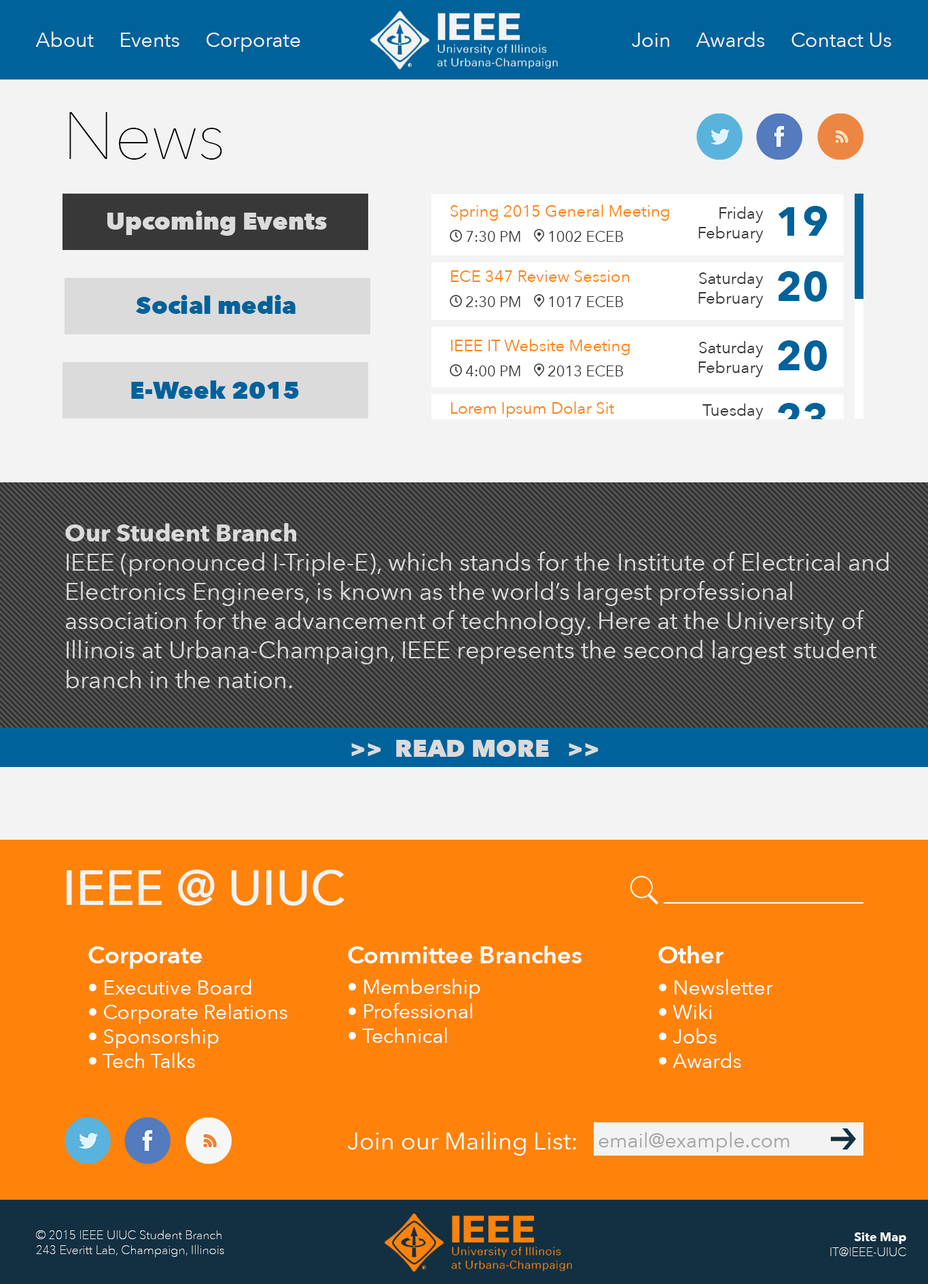
<style>
.page{position:relative;width:928px;height:1284px;background:#f3f3f3}
.page>*{position:absolute;margin:0}
.t1{font:20.4px "AvenirNext-Regular";color:#f3f3f3}
.t2{font:66.6px "AvenirNext-UltraLight";color:#000000}
.t3{font:16.3px "AvenirNext-Regular";color:#ff830a}
.t4{font:16.3px "AvenirNext-Regular";color:#383838}
.t5{font:40.8px "AvenirNext-Bold";color:#00629b}
.t6{font:24.5px "AvenirNext-Heavy";color:#dbdbdb}
.t7{font:15px "AvenirNext-Regular";color:#383838}
.t8{font:24.5px "AvenirNext-Heavy";color:#00629b}
.t9{font:16.3px "AvenirNext-Regular"}
.t10{font:40.8px "AvenirNext-Bold"}
.t11{font:24.5px "AvenirNext-Regular";color:#dbdbdb}
.t12{font:24.5px "AvenirNext-Bold";color:#dbdbdb}
.t13{font:48.9px "AvenirNext-Medium";color:#f3f3f3}
.t14{font:24.5px "AvenirNext-DemiBold";color:#ffffff}
.t15{font:20.4px "AvenirNext-Regular";color:#ffffff}
.t16{font:24.5px "AvenirNext-Regular";color:#ffffff}
.t17{font:20.4px "AvenirNext-Regular";color:#a4a4a4}
.t18{font:12.2px "AvenirNext-UltraLight";color:#f3f3f3}
.t19{font:12.2px "AvenirNext-Bold";color:#f3f3f3}
</style>
<div class="page">
<p class="t1" style="left:35px;top:31px;width:265px;height:21px">About     Events     Corporate</p>
<p class="t1" style="left:632px;top:31px;width:260px;height:16px">Join     Awards     Contact Us</p>
<p class="t2" style="left:69px;top:112px;width:153px;height:48px">News</p>
<p class="t3" style="left:451px;top:205px;width:218px;height:16px">Spring 2015 General Meeting</p>
<p class="t4" style="left:699px;top:207px;width:65px;height:36px;text-align:right">Friday<br>February</p>
<p class="t5" style="left:778px;top:206px;width:50px;height:30px">19</p>
<p class="t6" style="left:107px;top:211px;width:220px;height:25px">Upcoming Events</p>
<p class="t7" style="left:466px;top:231px;width:55px;height:11px">7:30 PM</p>
<p class="t7" style="left:549px;top:231px;width:75px;height:11px">1002 ECEB</p>
<p class="t3" style="left:451px;top:270px;width:178px;height:12px">ECE 347 Review Session</p>
<p class="t4" style="left:699px;top:272px;width:65px;height:36px;text-align:right">Saturday<br>February</p>
<p class="t5" style="left:778px;top:271px;width:49px;height:31px">20</p>
<p class="t8" style="left:136px;top:295px;width:160px;height:19px">Social media</p>
<p class="t7" style="left:466px;top:296px;width:55px;height:11px">2:30 PM</p>
<p class="t7" style="left:549px;top:296px;width:75px;height:11px">1017 ECEB</p>
<p class="t3" style="left:451px;top:339px;width:179px;height:16px">IEEE IT Website Meeting</p>
<p class="t4" style="left:699px;top:341px;width:65px;height:36px;text-align:right">Saturday<br>February</p>
<p class="t5" style="left:778px;top:340px;width:49px;height:31px">20</p>
<p class="t7" style="left:466px;top:366px;width:55px;height:11px">4:00 PM</p>
<p class="t7" style="left:548px;top:366px;width:76px;height:11px">2013 ECEB</p>
<p class="t8" style="left:131px;top:381px;width:168px;height:18px">E-Week 2015</p>
<p class="t3" style="left:451px;top:402px;width:163px;height:16px">Lorem Ipsum Dolar Sit</p>
<p class="t9" style="left:699px;top:404px;width:65px;height:36px;text-align:right">Tuesday<br>February</p>
<p class="t10" style="left:778px;top:403px;width:48px;height:31px">23</p>
<p class="t11" style="left:65px;top:523px;width:824px;height:165px"><span class="t12">Our Student Branch<br></span>IEEE (pronounced I-Triple-E), which stands for the Institute of Electrical and Electronics Engineers, is known as the world’s largest professional association for the advancement of technology. Here at the University of Illinois at Urbana-Champaign, IEEE represents the second largest student branch in the nation.</p>
<p class="t6" style="left:351px;top:740px;width:248px;height:17px">&gt;&gt;  READ MORE   &gt;&gt;</p>
<p class="t13" style="left:67px;top:870px;width:278px;height:36px">IEEE @ UIUC</p>
<p class="t14" style="left:88px;top:947px;width:115px;height:22px">Corporate</p>
<p class="t14" style="left:348px;top:946px;width:234px;height:18px">Committee Branches</p>
<p class="t14" style="left:659px;top:946px;width:65px;height:18px">Other</p>
<p class="t15" style="left:89px;top:979px;width:198px;height:89px">• Executive Board<br>• Corporate Relations<br>• Sponsorship<br>• Tech Talks</p>
<p class="t15" style="left:349px;top:979px;width:131px;height:64px">• Membership<br>• Professional<br>• Technical</p>
<p class="t15" style="left:659px;top:979px;width:114px;height:89px">• Newsletter<br>• Wiki<br>• Jobs<br>• Awards</p>
<p class="t16" style="left:347px;top:1132px;width:229px;height:24px">Join our Mailing List:</p>
<p class="t17" style="left:599px;top:1132px;width:191px;height:21px">email@example.com</p>
<p class="t18" style="left:36px;top:1230px;width:188px;height:28px">© 2015 IEEE UIUC Student Branch<br>243 Everitt Lab, Champaign, Illinois</p>
<p class="t18" style="left:830px;top:1233px;width:77px;height:24px;text-align:right"><span class="t19">Site Map<br></span>IT@IEEE-UIUC</p>
</div>
